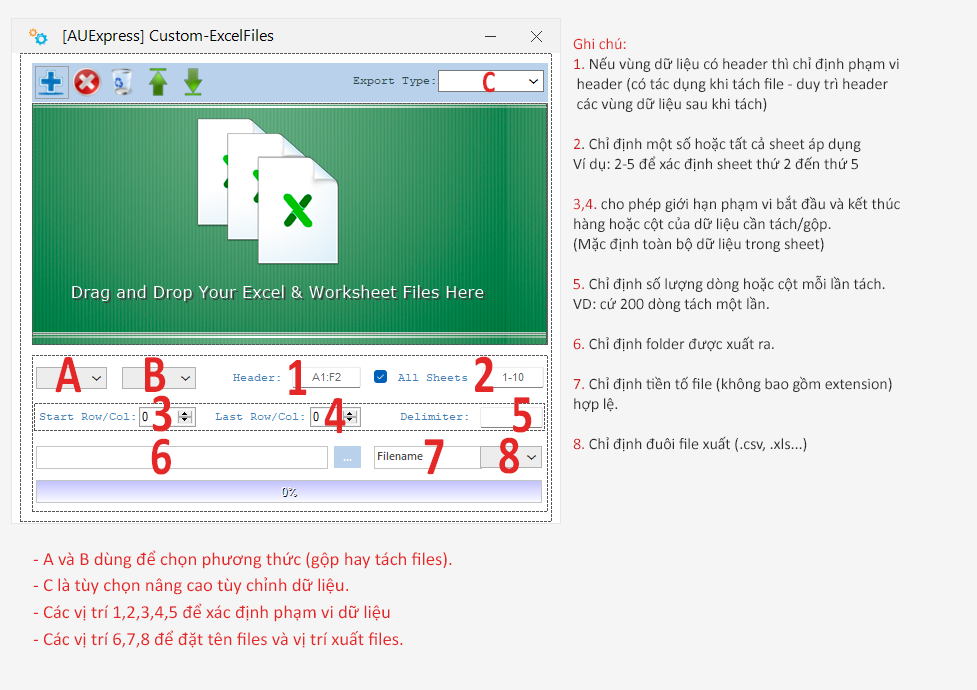
<style>
.page{position:relative;width:977px;height:690px;background:#f5f5f5}
.page>*{position:absolute;margin:0}
.t1{font:16px/20px "Calibri";color:#2e2e2e}
.t2{font:16px/34.7px "Calibri";color:#e42727}
.t3{font:16px/20px "Calibri";color:#ce1b1b}
.t4{font:16px/20px "Calibri";color:#cf1b1b}
.t5{font:31.7px "Calibri-Bold";color:#e42727;scale:0.8 1}
.t6{font:55px "Calibri-Bold";letter-spacing:-0.12em;color:#e42727;scale:0.8 1}
.t7{font:18.5px/26.7px "Calibri";color:#e42727}
</style>
<div class="page">
<p class="t1" style="left:573px;top:38px;width:327px;height:414px"><span class="t2">Ghi chú:<br></span><span class="t3">1.</span> Nếu vùng dữ liệu có header thì chỉ định phạm vi<br> header (có tác dụng khi tách file - duy trì header<br> các vùng dữ liệu sau khi tách)<br><br><span class="t4">2</span>. Chỉ định một số hoặc tất cả sheet áp dụng<br>Ví dụ: 2-5 để xác định sheet thứ 2 đến thứ 5<br><br><span class="t4">3,4.</span> cho phép giới hạn phạm vi bắt đầu và kết thúc<br>hàng hoặc cột của dữ liệu cần tách/gộp. <br>(Mặc định toàn bộ dữ liệu trong sheet)<br><br><span class="t4">5.</span> Chỉ định số lượng dòng hoặc cột mỗi lần tách.<br>VD: cứ 200 dòng tách một lần.<br><br><span class="t4">6.</span> Chỉ định folder được xuất ra.<br><br><span class="t4">7.</span> Chỉ định tiền tố file (không bao gồm extension)<br>hợp lệ.<br><br><span class="t4">8.</span> Chỉ định đuôi file xuất (.csv, .xls...)</p>
<p class="t5" style="left:483px;top:71px;width:12px;height:22px">C</p>
<p class="t6" style="left:55px;top:357px;width:27px;height:36px">A</p>
<p class="t6" style="left:145px;top:357px;width:21px;height:35px">B</p>
<p class="t6" style="left:289px;top:360px;width:18px;height:35px">1</p>
<p class="t6" style="left:475px;top:356px;width:19px;height:36px">2</p>
<p class="t6" style="left:152px;top:395px;width:20px;height:37px">3</p>
<p class="t6" style="left:324px;top:398px;width:22px;height:36px">4</p>
<p class="t6" style="left:513px;top:397px;width:19px;height:36px">5</p>
<p class="t6" style="left:151px;top:438px;width:20px;height:37px">6</p>
<p class="t6" style="left:499px;top:437px;width:20px;height:37px">8</p>
<p class="t6" style="left:424px;top:439px;width:20px;height:36px">7</p>
<p class="t7" style="left:33px;top:550px;width:419px;height:98px">- A và B dùng để chọn phương thức (gộp hay tách files).<br>- C là tùy chọn nâng cao tùy chỉnh dữ liệu.<br>- Các vị trí 1,2,3,4,5 để xác định phạm vi dữ liệu<br>- Các vị trí 6,7,8 để đặt tên files và vị trí xuất files.</p>
</div>
